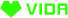
<style>
.page{position:relative;width:68px;height:18px;background:#ffffff}
.page>*{position:absolute;margin:0}
.t1{font:18.7px "DFSoGeiStd-W5";letter-spacing:0.039em;color:#2fff00;scale:0.86 1}
</style>
<div class="page">
<p class="t1" style="left:26px;top:3px;width:42px;height:12px">VIDA</p>
</div>
